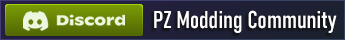
<style>
.page{position:relative;width:345px;height:40px}
.page>*{position:absolute;margin:0}
.t1{font:24px "Bahnschrift-Condensed";color:#ffffff;font-weight:bold}
</style>
<div class="page">
<p class="t1" style="left:154px;top:10px;width:183px;height:23px">PZ Modding Community</p>
</div>
